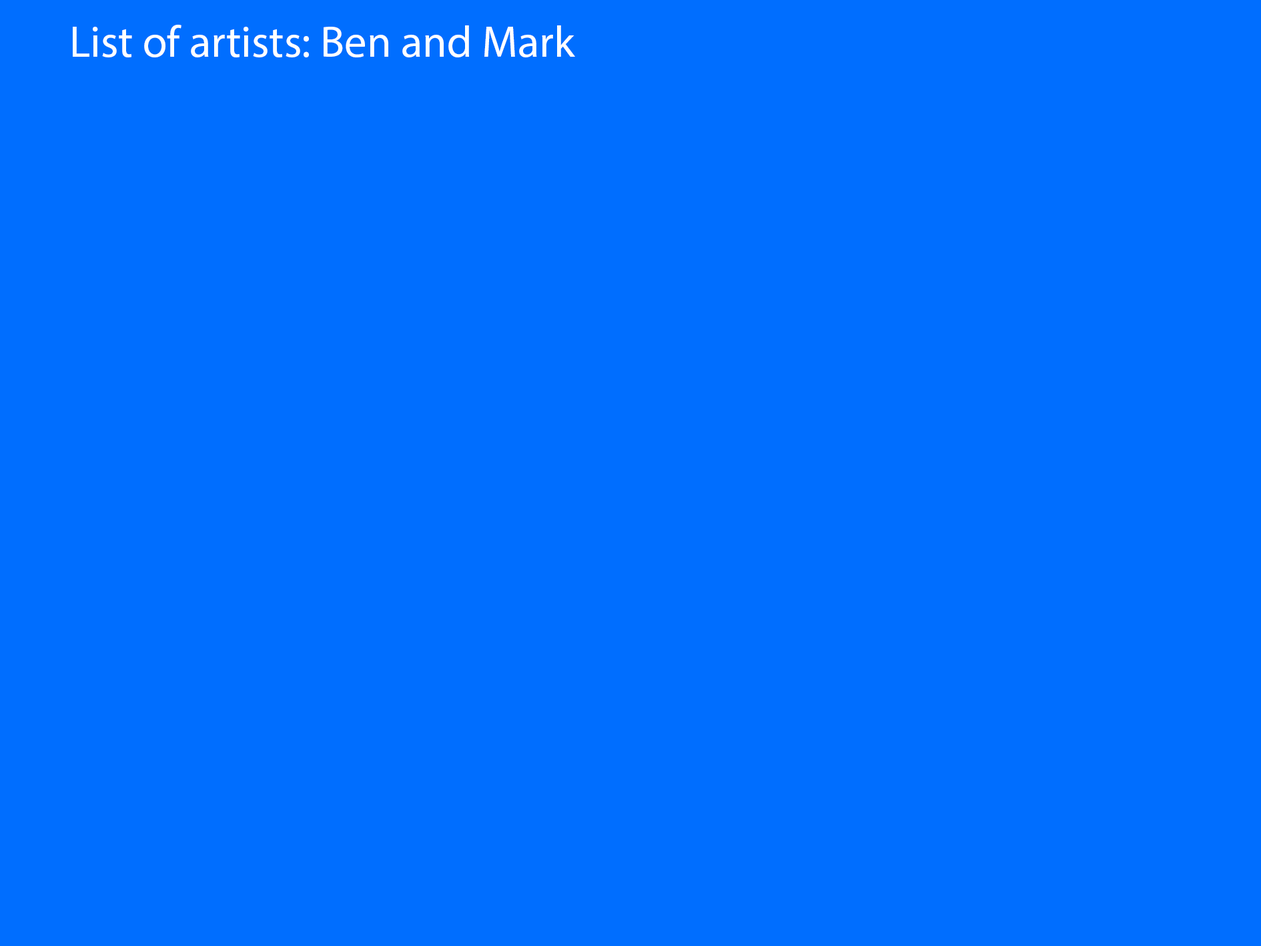
<style>
.page{position:relative;width:1261px;height:946px;background:#006eff}
.page>*{position:absolute;margin:0}
.t1{font:44.5px "MyriadPro-Regular";color:#ffffff}
</style>
<div class="page">
<p class="t1" style="left:73px;top:25px;width:502px;height:32px">List of artists: Ben and Mark</p>
</div>
